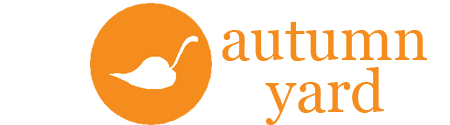
<style>
.page{position:relative;width:450px;height:125px;background:#ffffff}
.page>*{position:absolute;margin:0}
.t1{font:60px "Georgia";color:#f48d1d}
</style>
<div class="page">
<p class="t1" style="left:222px;top:22px;width:205px;height:39px">autumn</p>
<p class="t1" style="left:265px;top:67px;width:119px;height:58px">yard</p>
</div>
